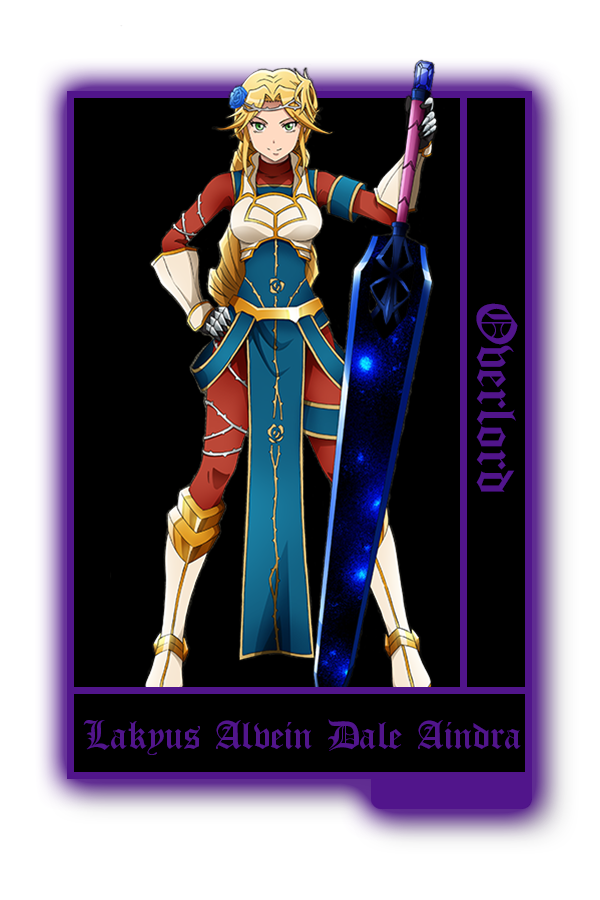
<style>
.page{position:relative;width:600px;height:900px;background:#000000}
.page>*{position:absolute;margin:0}
.t1{font:61.5px "OldLondon";color:#51158b}
.t2{font:43.7px "OldLondon";color:#51158b}
</style>
<div class="page">
<p class="t1" style="left:476px;top:303px;width:42px;height:189px;rotate:90deg">Overlord</p>
<p class="t2" style="left:83px;top:719px;width:438px;height:36px">Lakyus Alvein Dale Aindra</p>
</div>
